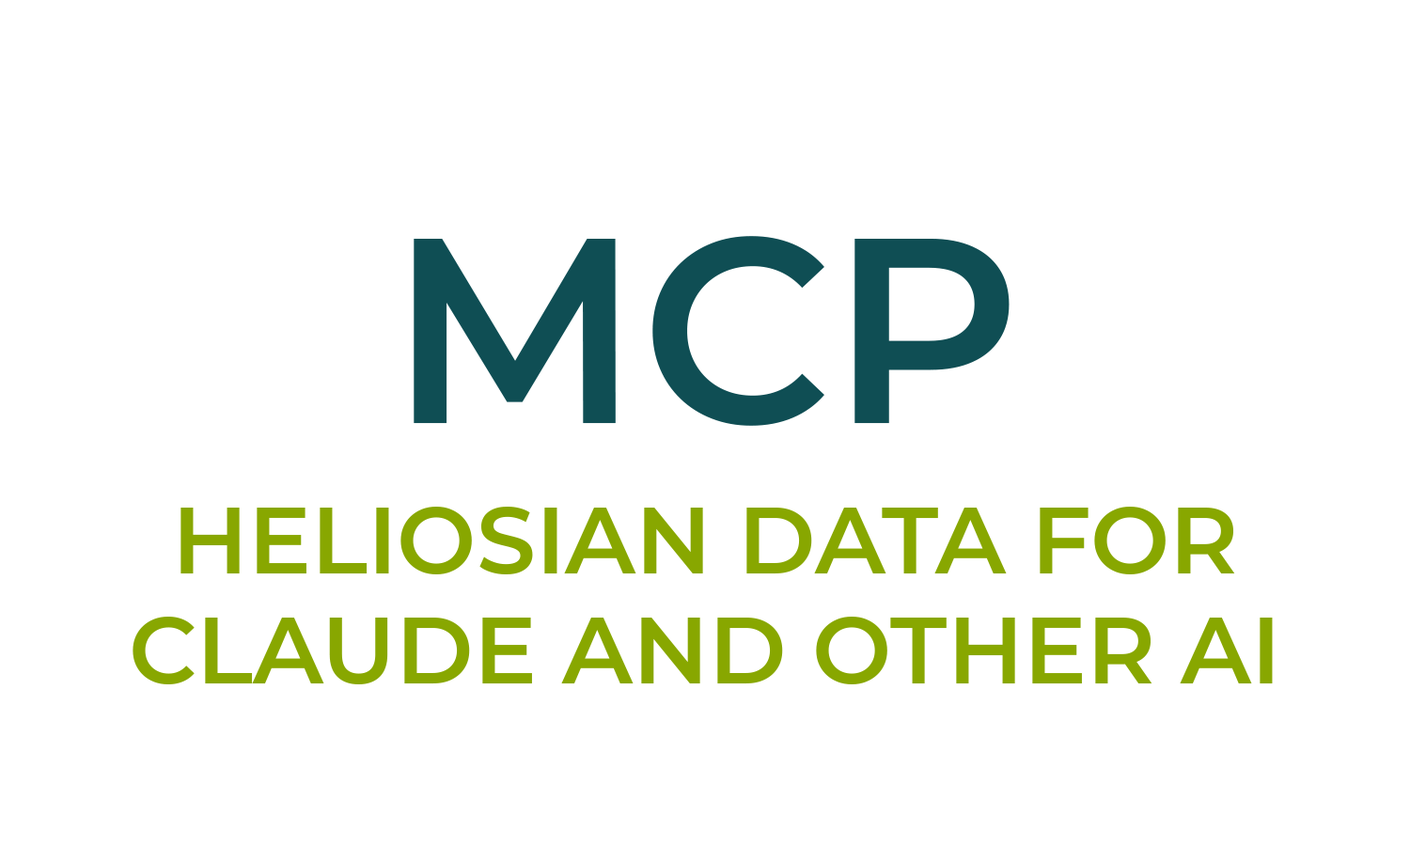
<style>
.page{position:relative;width:1410px;height:846px;background:#ffffff}
.page>*{position:absolute;margin:0}
.t1{font:263.1px "Montserrat-SemiBold";color:#0f4e54}
.t2{font:94px/0.2px "Montserrat-SemiBold";color:#88a700;text-transform:uppercase}
</style>
<div class="page">
<p class="t1" style="left:414px;top:236px;width:595px;height:190px">MCP</p>
<p class="t2" style="left:133px;top:507px;width:1140px;height:177px;text-align:center">Heliosian data for<br>claude and other AI</p>
</div>
